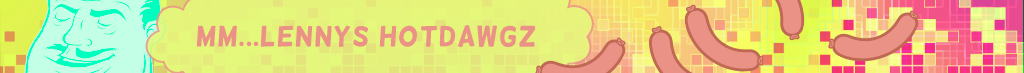
<style>
.page{position:relative;width:1024px;height:73px}
.page>*{position:absolute;margin:0}
.t1{font:28.1px "Helsinki";letter-spacing:0.04em;color:#eb9286}
</style>
<div class="page">
<p class="t1" style="left:196px;top:25px;width:340px;height:23px">Mm...Lennys hotdawgz</p>
</div>
